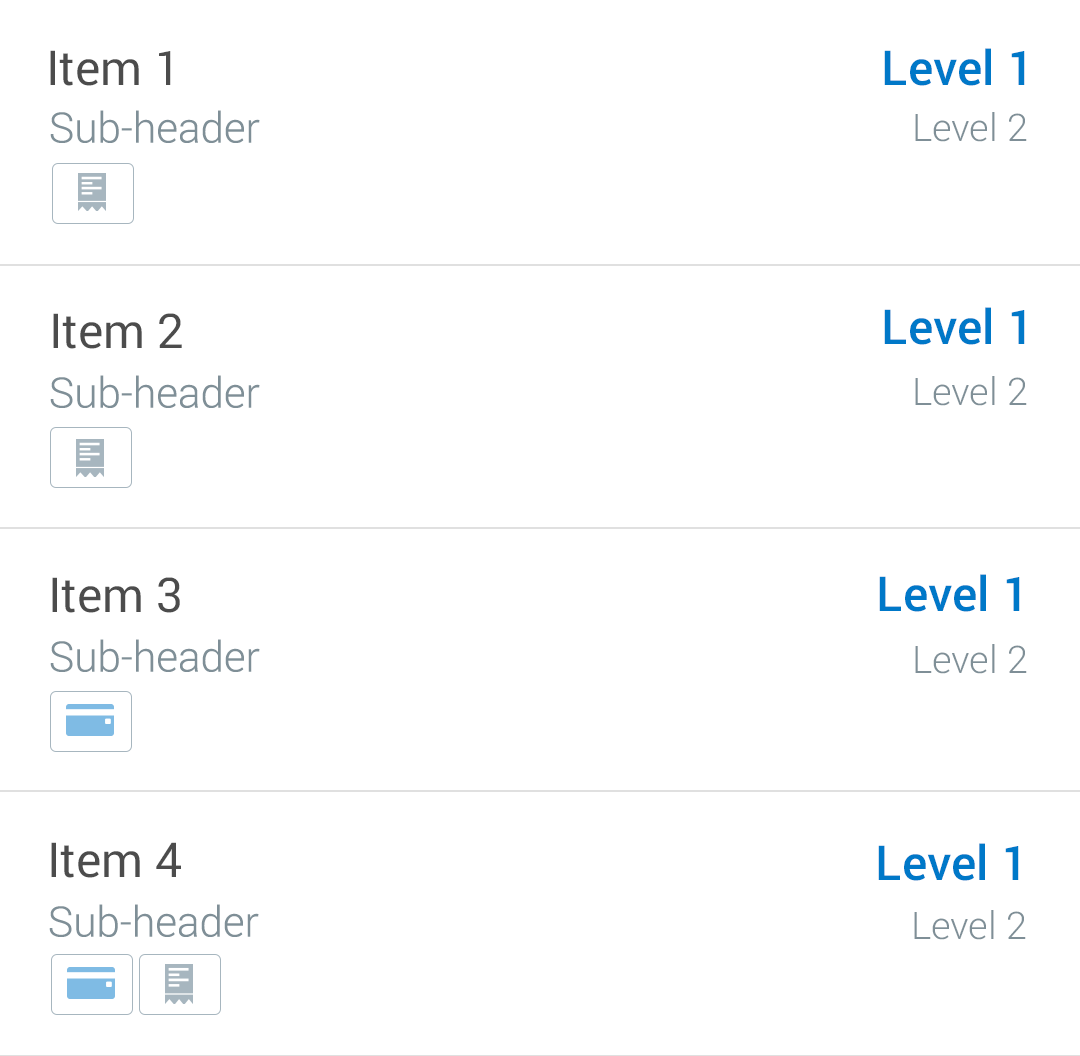
<style>
.page{position:relative;width:1080px;height:1056px;background:#ffffff}
.page>*{position:absolute;margin:0}
.t1{font:48px "Roboto-Regular";color:#4c4c4c}
.t2{font:48px "Roboto-Medium";color:#0078c8}
.t3{font:42px "Roboto-Light";color:#7f8f97}
.t4{font:38px "Roboto-Light";color:#7f8f97}
</style>
<div class="page">
<p class="t1" style="left:50px;top:50px;width:121px;height:36px">Item 1</p>
<p class="t2" style="left:884px;top:48px;width:141px;height:38px">Level 1</p>
<p class="t3" style="left:50px;top:110px;width:210px;height:33px">Sub-header</p>
<p class="t4" style="left:915px;top:112px;width:112px;height:30px">Level 2</p>
<p class="t1" style="left:53px;top:313px;width:129px;height:36px">Item 2</p>
<p class="t2" style="left:884px;top:307px;width:141px;height:38px">Level 1</p>
<p class="t3" style="left:50px;top:375px;width:210px;height:33px">Sub-header</p>
<p class="t4" style="left:915px;top:376px;width:112px;height:30px">Level 2</p>
<p class="t1" style="left:52px;top:577px;width:128px;height:36px">Item 3</p>
<p class="t2" style="left:879px;top:574px;width:141px;height:38px">Level 1</p>
<p class="t3" style="left:50px;top:639px;width:210px;height:33px">Sub-header</p>
<p class="t4" style="left:915px;top:644px;width:112px;height:30px">Level 2</p>
<p class="t1" style="left:51px;top:842px;width:130px;height:36px">Item 4</p>
<p class="t2" style="left:878px;top:843px;width:141px;height:38px">Level 1</p>
<p class="t3" style="left:49px;top:904px;width:210px;height:33px">Sub-header</p>
<p class="t4" style="left:914px;top:910px;width:112px;height:30px">Level 2</p>
</div>
